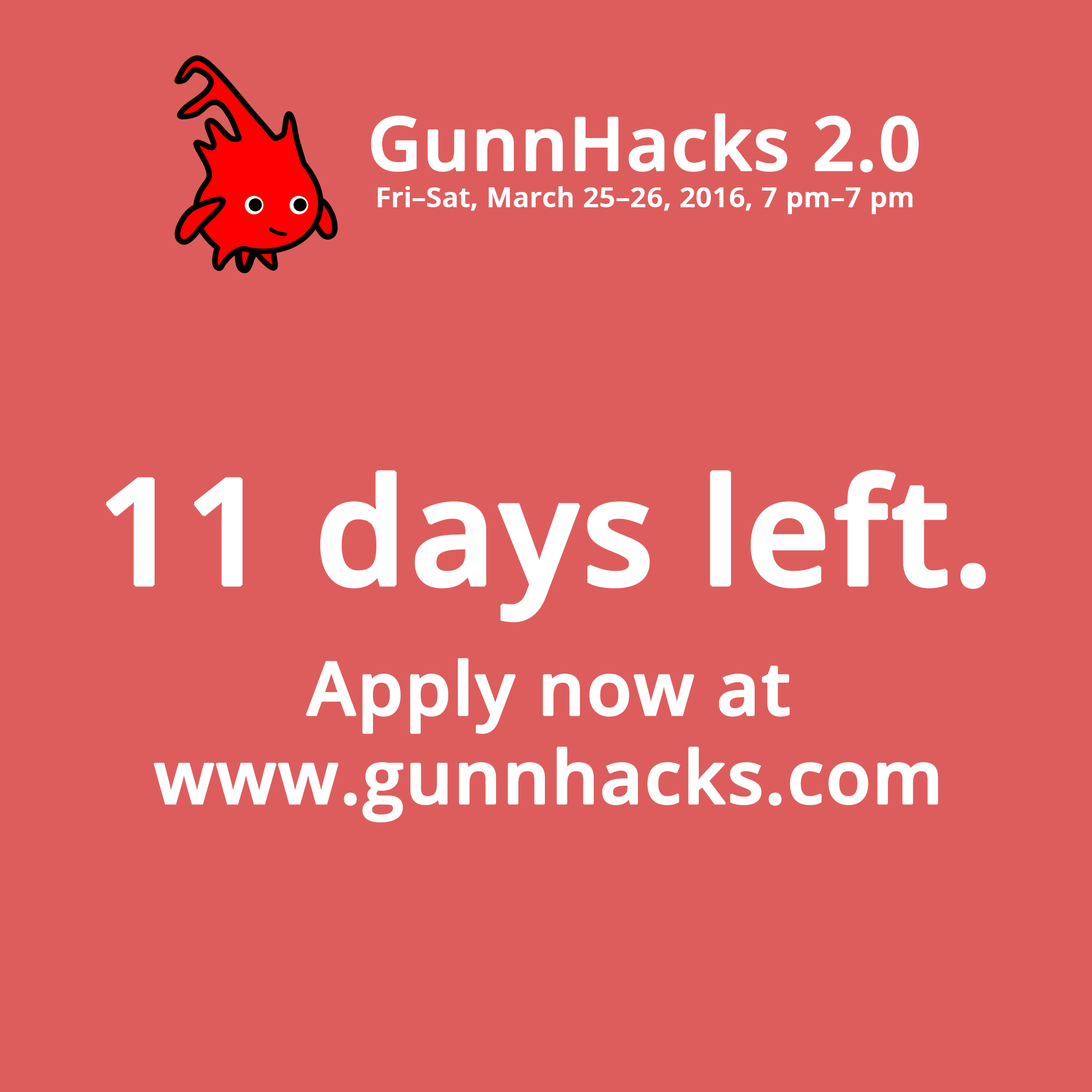
<style>
.page{position:relative;width:1092px;height:1092px;background:#dd5d5c}
.page>*{position:absolute;margin:0}
.t1{font:73.6px "OpenSans-Semibold";color:#ffffff;font-weight:bold}
.t2{font:27.6px "OpenSans-Semibold";color:#ffffff;font-weight:bold}
.t3{font:147.1px "OpenSans-Semibold";color:#ffffff;font-weight:bold}
</style>
<div class="page">
<p class="t1" style="left:371px;top:113px;width:548px;height:59px">GunnHacks 2.0</p>
<p class="t2" style="left:378px;top:186px;width:535px;height:28px">Fri–Sat, March 25–26, 2016, 7 pm–7 pm</p>
<p class="t3" style="left:106px;top:470px;width:880px;height:152px">11 days left.</p>
<p class="t1" style="left:153px;top:658px;width:786px;height:164px;text-align:center">Apply now at<br>www.gunnhacks.com</p>
</div>
